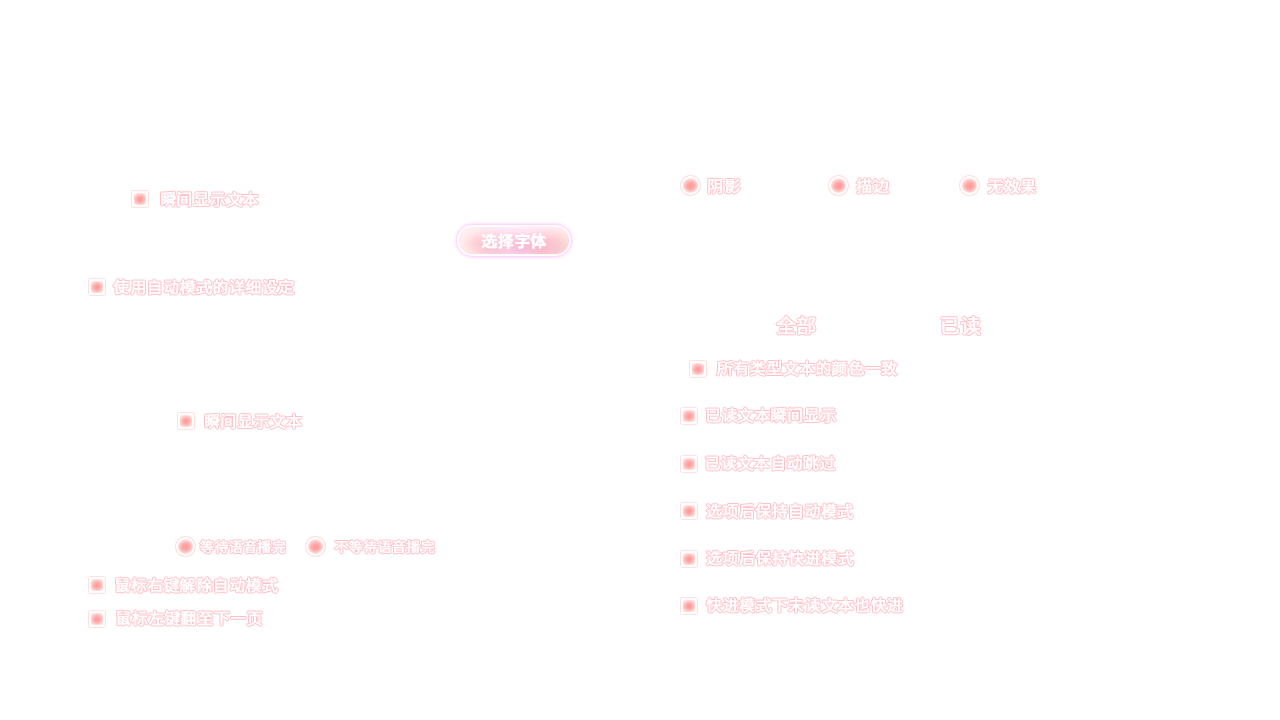
<style>
.page{position:relative;width:1280px;height:720px;background:#ffffff}
.page>*{position:absolute;margin:0}
.t1{font:16px "SourceHanSansSC-Regular";color:#fffefe;font-weight:bold}
.t2{font:16px "SourceHanSansSC-Bold";color:#ffffff;font-weight:bold}
.t3{font:20px "SourceHanSansSC-Regular";color:#fffefe;font-weight:bold}
.t4{font:14px "SourceHanSansSC-Regular";color:#fffefe;font-weight:bold}
</style>
<div class="page">
<p class="t1" style="left:708px;top:178px;width:33px;height:16px">阴影</p>
<p class="t1" style="left:856px;top:178px;width:33px;height:16px">描边</p>
<p class="t1" style="left:987px;top:178px;width:49px;height:16px">无效果</p>
<p class="t1" style="left:161px;top:191px;width:98px;height:16px">瞬间显示文本</p>
<p class="t2" style="left:481px;top:233px;width:66px;height:16px">选择字体</p>
<p class="t1" style="left:113px;top:279px;width:182px;height:16px">使用自动模式的详细设定</p>
<p class="t3" style="left:776px;top:315px;width:40px;height:20px">全部</p>
<p class="t3" style="left:941px;top:316px;width:40px;height:20px">已读</p>
<p class="t1" style="left:716px;top:360px;width:181px;height:16px">所有类型文本的颜色一致</p>
<p class="t1" style="left:205px;top:413px;width:97px;height:16px">瞬间显示文本</p>
<p class="t1" style="left:706px;top:407px;width:130px;height:16px">已读文本瞬间显示</p>
<p class="t1" style="left:705px;top:455px;width:131px;height:16px">已读文本自动跳过</p>
<p class="t1" style="left:706px;top:503px;width:147px;height:16px">选项后保持自动模式</p>
<p class="t4" style="left:200px;top:540px;width:86px;height:14px">等待语音播完</p>
<p class="t4" style="left:334px;top:540px;width:101px;height:14px">不等待语音播完</p>
<p class="t1" style="left:706px;top:550px;width:148px;height:16px">选项后保持快进模式</p>
<p class="t1" style="left:116px;top:577px;width:162px;height:16px">鼠标右键解除自动模式</p>
<p class="t1" style="left:706px;top:597px;width:197px;height:16px">快进模式下未读文本也快进</p>
<p class="t1" style="left:117px;top:610px;width:145px;height:16px">鼠标左键翻至下一页</p>
</div>
